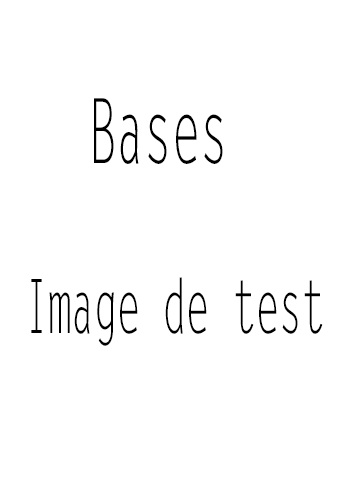
<style>
.page{position:relative;width:350px;height:500px;background:#ffffff}
.page>*{position:absolute;margin:0}
.t1{font:90px "LetterGothicStd";letter-spacing:-0.05em;color:#000000;scale:0.56 1}
.t2{font:75px "LetterGothicStd";letter-spacing:-0.05em;color:#000000;scale:0.56 1}
</style>
<div class="page">
<p class="t1" style="left:94px;top:98px;width:129px;height:66px">Bases</p>
<p class="t2" style="left:31px;top:277px;width:292px;height:69px">Image de test</p>
</div>
